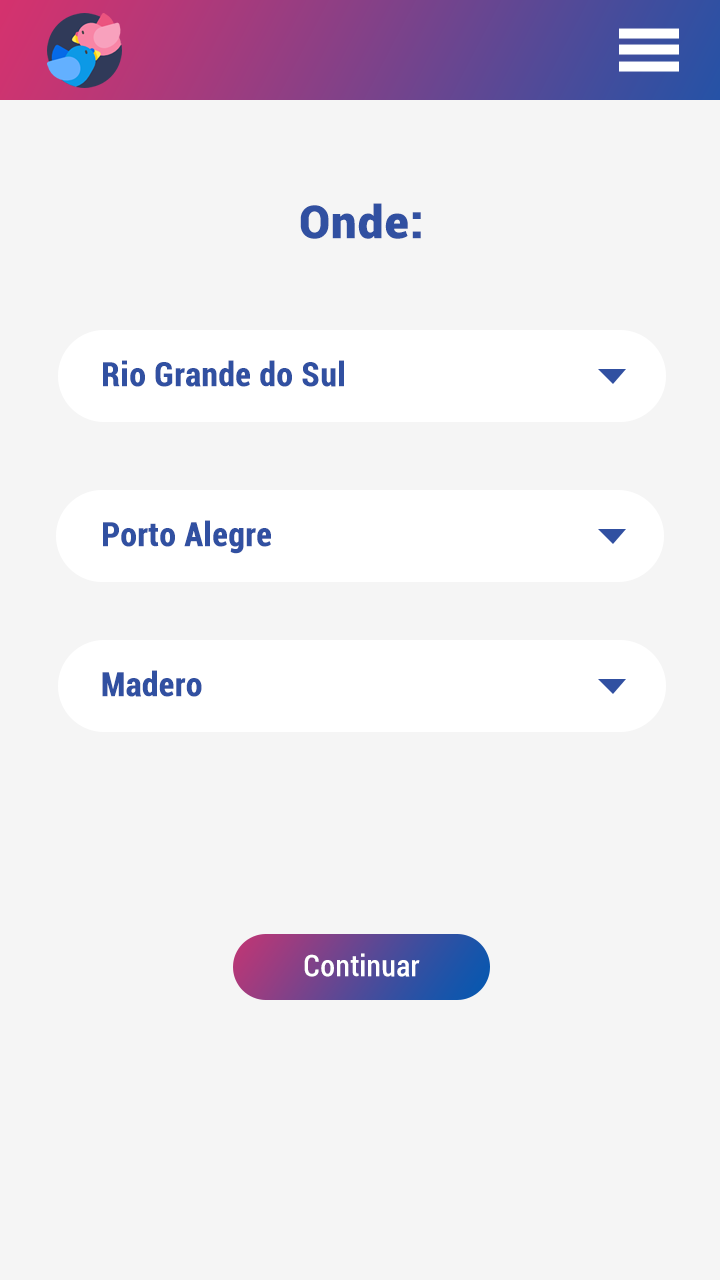
<style>
.page{position:relative;width:720px;height:1280px;background:#f5f5f5}
.page>*{position:absolute;margin:0}
.t1{font:45px "Roboto-Black";color:#3150a1;font-weight:bold}
.t2{font:33px "Roboto-BoldCondensed";color:#3150a1;font-weight:bold}
.t3{font:29px "Roboto-Condensed";color:#ffffff;font-weight:bold}
</style>
<div class="page">
<p class="t1" style="left:300px;top:203px;width:121px;height:36px">Onde:</p>
<p class="t2" style="left:103px;top:360px;width:241px;height:27px">Rio Grande do Sul</p>
<p class="t2" style="left:103px;top:520px;width:168px;height:34px">Porto Alegre</p>
<p class="t2" style="left:102px;top:670px;width:100px;height:27px">Madero</p>
<p class="t3" style="left:304px;top:953px;width:116px;height:24px">Continuar</p>
</div>
